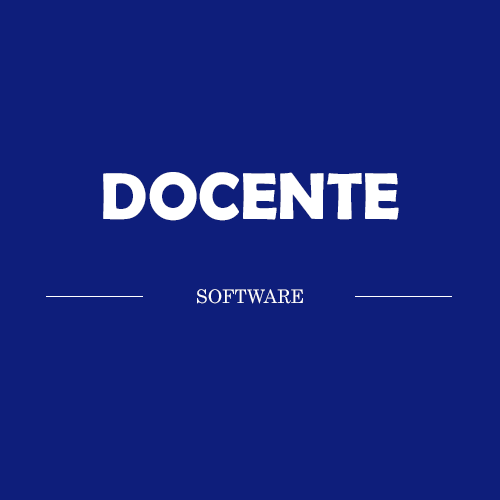
<style>
.page{position:relative;width:500px;height:500px;background:#0e1e7b}
.page>*{position:absolute;margin:0}
.t1{font:66.7px "BerlinSansFBDemi-Bold";color:#ffffff}
.t2{font:18.7px "Century";color:#ffffff}
</style>
<div class="page">
<p class="t1" style="left:103px;top:172px;width:296px;height:49px">DOCENTE</p>
<p class="t2" style="left:197px;top:289px;width:106px;height:15px">SOFTWARE</p>
</div>
